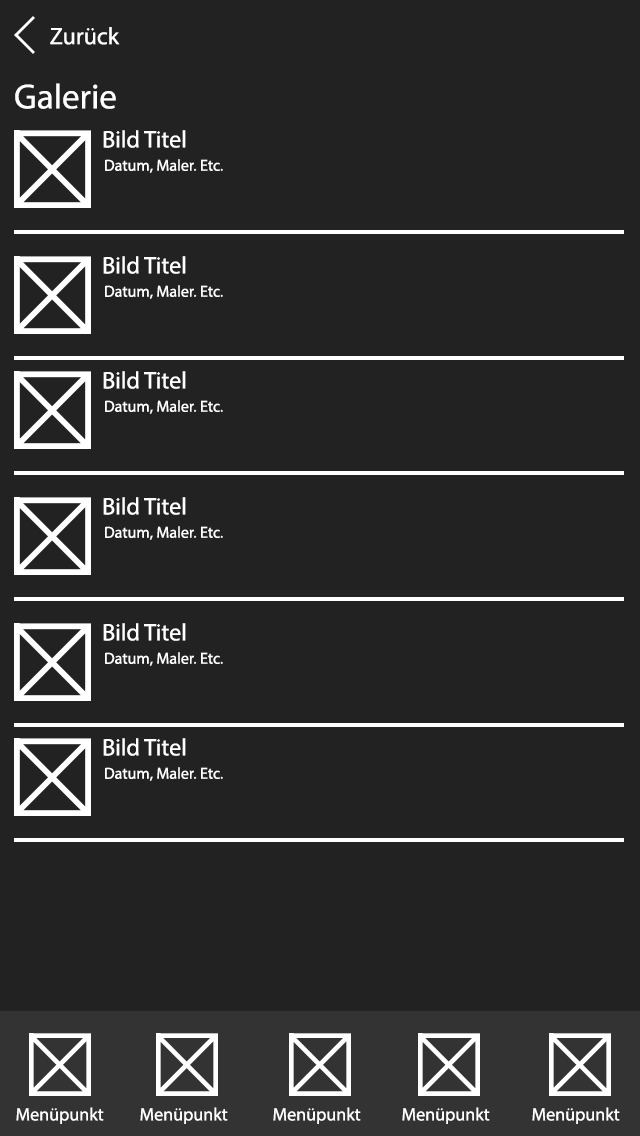
<style>
.page{position:relative;width:640px;height:1136px;background:#222222}
.page>*{position:absolute;margin:0}
.t1{font:24px "MyriadPro-Regular";color:#ffffff}
.t2{font:35px "MyriadPro-Regular";color:#ffffff}
.t3{font:16px "MyriadPro-Regular";color:#ffffff}
.t4{font:18px "MyriadPro-Regular";color:#ffffff}
</style>
<div class="page">
<p class="t1" style="left:50px;top:27px;width:70px;height:18px">Zurück</p>
<p class="t2" style="left:15px;top:83px;width:101px;height:26px">Galerie</p>
<p class="t1" style="left:103px;top:130px;width:83px;height:18px">Bild Titel</p>
<p class="t3" style="left:105px;top:159px;width:118px;height:14px">Datum, Maler. Etc.</p>
<p class="t1" style="left:103px;top:256px;width:83px;height:18px">Bild Titel</p>
<p class="t3" style="left:105px;top:285px;width:118px;height:14px">Datum, Maler. Etc.</p>
<p class="t1" style="left:103px;top:371px;width:83px;height:18px">Bild Titel</p>
<p class="t3" style="left:105px;top:400px;width:118px;height:14px">Datum, Maler. Etc.</p>
<p class="t1" style="left:103px;top:497px;width:83px;height:18px">Bild Titel</p>
<p class="t3" style="left:105px;top:526px;width:118px;height:14px">Datum, Maler. Etc.</p>
<p class="t1" style="left:103px;top:623px;width:83px;height:18px">Bild Titel</p>
<p class="t3" style="left:105px;top:652px;width:118px;height:14px">Datum, Maler. Etc.</p>
<p class="t1" style="left:103px;top:738px;width:83px;height:18px">Bild Titel</p>
<p class="t3" style="left:105px;top:767px;width:118px;height:14px">Datum, Maler. Etc.</p>
<p class="t4" style="left:16px;top:1107px;width:88px;height:17px">Menüpunkt</p>
<p class="t4" style="left:140px;top:1107px;width:88px;height:17px">Menüpunkt</p>
<p class="t4" style="left:273px;top:1107px;width:88px;height:17px">Menüpunkt</p>
<p class="t4" style="left:402px;top:1107px;width:88px;height:17px">Menüpunkt</p>
<p class="t4" style="left:532px;top:1107px;width:88px;height:17px">Menüpunkt</p>
</div>
